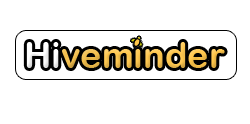
<style>
.page{position:relative;width:250px;height:124px;background:#ffffff}
.page>*{position:absolute;margin:0}
.t1{font:36px "ArialRoundedMTBold";color:#ffc850}
.t2{font:36px "ArialRoundedMTBold";color:#ffffff}
.t3{font:36px "ArialRoundedMTBold";color:#f2be4c}
.t4{font:36px "ArialRoundedMTBold";color:#ffc64a}
</style>
<div class="page">
<p class="t1" style="left:26px;top:42px;width:199px;height:26px"><span class="t2">Hi</span><span class="t3">ve</span>mind<span class="t4">er</span></p>
</div>
